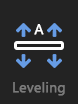
<style>
.page{position:relative;width:78px;height:104px;background:#232323}
.page>*{position:absolute;margin:0}
.t1{font:14px "SegoeUI";color:#ffffff;font-weight:bold}
.t2{font:14px "SegoeUI";color:#7c7c7c;font-weight:bold}
</style>
<div class="page">
<p class="t1" style="left:34px;top:24px;width:10px;height:11px">A</p>
<p class="t2" style="left:13px;top:82px;width:52px;height:14px">Leveling</p>
</div>
